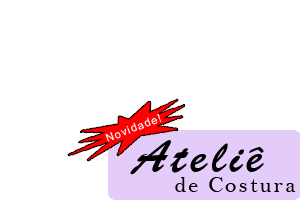
<style>
.page{position:relative;width:300px;height:200px;background:#ffffff}
.page>*{position:absolute;margin:0}
.t1{font:11px "ArialMT";letter-spacing:0.1em;color:#ffffff}
.t2{font:45.4px "BrushScriptStd";letter-spacing:0.1em;color:#000000}
.t3{font:22.7px "BellMT";letter-spacing:0.1em;color:#000000}
</style>
<div class="page">
<p class="t1" style="left:105px;top:113px;width:57px;height:29px;rotate:-21deg">Novidade!</p>
<p class="t2" style="left:130px;top:140px;width:134px;height:35px">Ateliê</p>
<p class="t3" style="left:175px;top:177px;width:121px;height:15px">de Costura</p>
</div>
